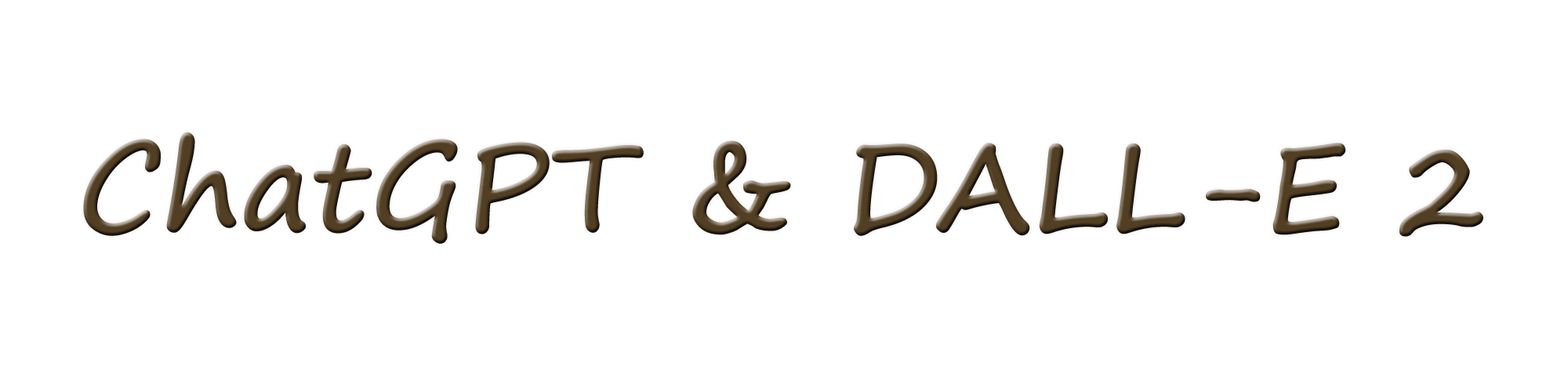
<style>
.page{position:relative;width:1568px;height:392px;background:#ffffff}
.page>*{position:absolute;margin:0}
.t1{font:117.6px "SegoePrint";font-weight:bold}
</style>
<div class="page">
<p class="t1" style="left:83px;top:132px;width:1400px;height:112px">ChatGPT &amp; DALL-E 2</p>
</div>
